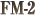
<style>
.page{position:relative;width:45px;height:15px;background:#ffffff}
.page>*{position:absolute;margin:0}
.t1{font:17px "RyuminPro-ExBold";letter-spacing:-0.06em;color:#4a3f32;font-weight:bold;scale:0.9 1}
</style>
<div class="page">
<p class="t1" style="left:0px;top:1px;width:35px;height:14px">FM-2</p>
</div>
